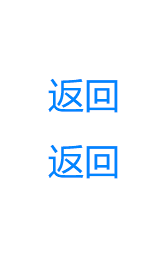
<style>
.page{position:relative;width:160px;height:256px;background:#ffffff}
.page>*{position:absolute;margin:0}
.t1{font:36px "MicrosoftYaHei";letter-spacing:0.01em;color:#0085ff}
</style>
<div class="page">
<p class="t1" style="left:48px;top:78px;width:70px;height:35px">返回</p>
<p class="t1" style="left:48px;top:144px;width:70px;height:35px">返回</p>
</div>
